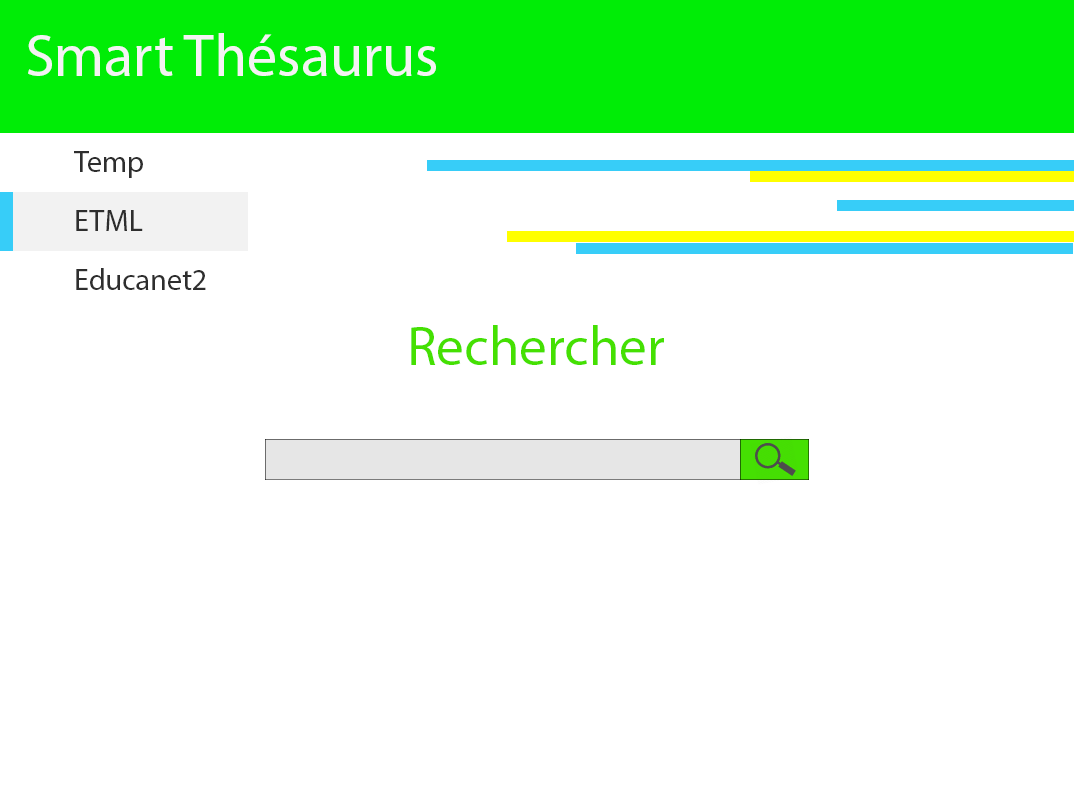
<style>
.page{position:relative;width:1074px;height:786px;background:#ffffff}
.page>*{position:absolute;margin:0}
.t1{font:60px "MyriadPro-Regular";color:#f4f3f3}
.t2{font:30px "MyriadPro-Regular";color:#2e2e2e}
.t3{font:55px "MyriadPro-Regular";color:#45e002}
</style>
<div class="page">
<p class="t1" style="left:28px;top:33px;width:408px;height:43px">Smart Thésaurus</p>
<p class="t2" style="left:74px;top:151px;width:69px;height:27px">Temp</p>
<p class="t2" style="left:76px;top:210px;width:67px;height:21px">ETML</p>
<p class="t2" style="left:76px;top:268px;width:130px;height:22px">Educanet2</p>
<p class="t3" style="left:411px;top:325px;width:253px;height:40px">Rechercher</p>
</div>
